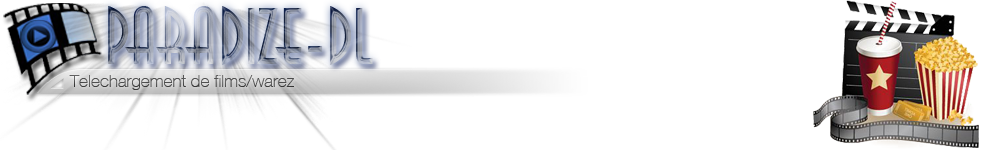
<style>
.page{position:relative;width:990px;height:150px;background:#ffffff}
.page>*{position:absolute;margin:0}
.t1{font:75px "Anastasia"}
.t2{font:17.3px "HelveNueThin";color:#393939}
</style>
<div class="page">
<p class="t1" style="left:108px;top:6px;width:265px;height:59px">paradize-dl</p>
<p class="t2" style="left:69px;top:75px;width:225px;height:15px">Telechargement de films/warez</p>
</div>
